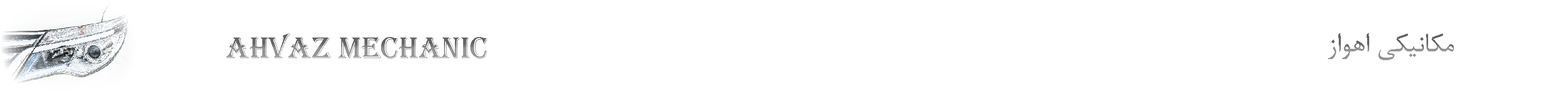
<style>
.page{position:relative;width:1568px;height:92px;background:#ffffff}
.page>*{position:absolute;margin:0}
.t1{font:31px "Algerian"}
.t2{font:31px "BNazanin"}
</style>
<div class="page">
<p class="t1" style="left:226px;top:33px;width:261px;height:26px">ahvaz mechanic</p>
<p class="t2" style="left:1328px;top:33px;width:126px;height:27px">مکانیکی اهواز</p>
</div>
